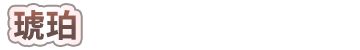
<style>
.page{position:relative;width:360px;height:50px;background:#ffffff}
.page>*{position:absolute;margin:0}
.t1{font:32px "SourceHanSansSC-Bold";font-weight:bold}
</style>
<div class="page">
<p class="t1" style="left:14px;top:10px;width:62px;height:31px">琥珀</p>
</div>
